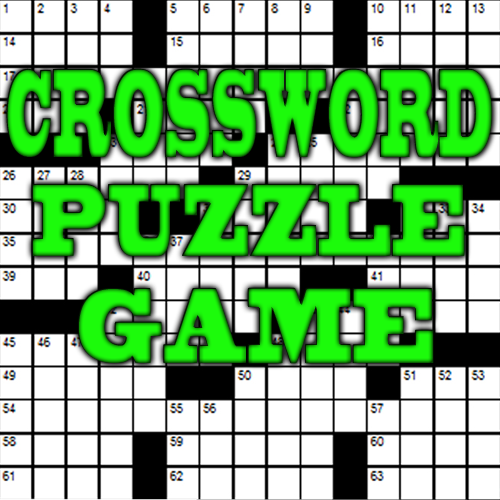
<style>
.page{position:relative;width:500px;height:500px;background:#ffffff}
.page>*{position:absolute;margin:0}
.t1{font:117.2px "BlackoakStd";scale:0.25 1}
.t2{font:95.6px "BlackoakStd";color:#1cfb0b;scale:0.44 1}
.t3{font:100px "BlackoakStd";color:#1cfb0b;scale:0.46 1}
</style>
<div class="page">
<p class="t1" style="left:6px;top:68px;width:486px;height:90px">CROSSWORD</p>
<p class="t2" style="left:32px;top:184px;width:433px;height:72px">PUZZLE</p>
<p class="t3" style="left:78px;top:287px;width:356px;height:77px">GAME</p>
</div>
